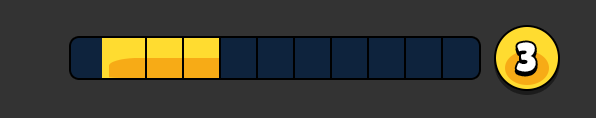
<style>
.page{position:relative;width:596px;height:118px;background:#333333}
.page>*{position:absolute;margin:0}
.t1{font:40px "LilitaOne";color:#ffffff;text-transform:uppercase}
</style>
<div class="page">
<p class="t1" style="left:516px;top:42px;width:20px;height:30px">3</p>
</div>
